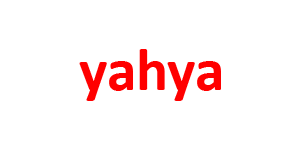
<style>
.page{position:relative;width:300px;height:150px;background:#ffffff}
.page>*{position:absolute;margin:0}
.t1{font:60px "Calibri-Bold";color:#ff0000}
</style>
<div class="page">
<p class="t1" style="left:79px;top:49px;width:142px;height:52px">yahya</p>
</div>
